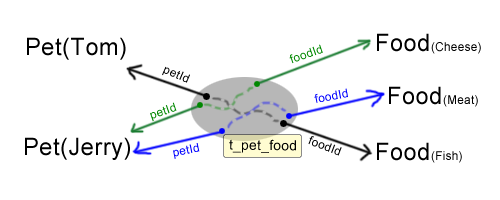
<style>
.page{position:relative;width:500px;height:200px;background:#ffffff}
.page>*{position:absolute;margin:0}
.t1{font:24px "ArialMT";letter-spacing:0.025em;color:#000000}
.t2{font:12px "ArialMT";letter-spacing:0.025em;color:#000000}
.t3{font:12px "ArialMT";letter-spacing:0.025em;color:#008800}
.t4{font:12px "ArialMT";letter-spacing:0.025em;color:#0000ff}
.t5{font:14px "ArialMT";letter-spacing:0.025em;color:#000000}
</style>
<div class="page">
<p class="t1" style="left:27px;top:37px;width:99px;height:23px">Pet(Tom)</p>
<p class="t2" style="left:377px;top:33px;width:104px;height:21px"><span class="t1">Food</span>(Cheese)</p>
<p class="t3" style="left:289px;top:44px;width:34px;height:20px;rotate:-19deg">foodId</p>
<p class="t2" style="left:162px;top:66px;width:28px;height:17px;rotate:23deg">petId</p>
<p class="t4" style="left:314px;top:88px;width:34px;height:15px;rotate:-11deg">foodId</p>
<p class="t2" style="left:389px;top:86px;width:89px;height:21px"><span class="t1">Food</span>(Meat)</p>
<p class="t3" style="left:150px;top:102px;width:27px;height:20px;rotate:-19deg">petId</p>
<p class="t1" style="left:25px;top:137px;width:105px;height:23px">Pet(Jerry)</p>
<p class="t2" style="left:308px;top:136px;width:34px;height:20px;rotate:21deg">foodId</p>
<p class="t4" style="left:173px;top:143px;width:27px;height:16px;rotate:-12deg">petId</p>
<p class="t5" style="left:229px;top:139px;width:67px;height:14px;rotate:1deg">t_pet_food</p>
<p class="t2" style="left:377px;top:142px;width:85px;height:21px"><span class="t1">Food</span>(Fish)</p>
</div>
